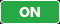
<style>
.page{position:relative;width:60px;height:24px;background:#28a745}
.page>*{position:absolute;margin:0}
.t1{font:14px "SegoeUI-Bold";color:#ffffff}
</style>
<div class="page">
<p class="t1" style="left:19px;top:7px;width:21px;height:10px">ON</p>
</div>
